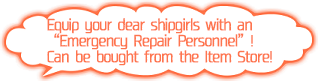
<style>
.page{position:relative;width:318px;height:81px;background:#ffffff}
.page>*{position:absolute;margin:0}
.t1{font:15px/16px "04KanjyukuGothic";letter-spacing:-0.08em;color:#fe754e;font-weight:bold;scale:0.9 1}
</style>
<div class="page">
<p class="t1" style="left:47px;top:18px;width:225px;height:48px">Equip your dear shipgirls with an<br>“Emergency Repair Personnel”!<br>Can be bought from the Item Store!</p>
</div>
